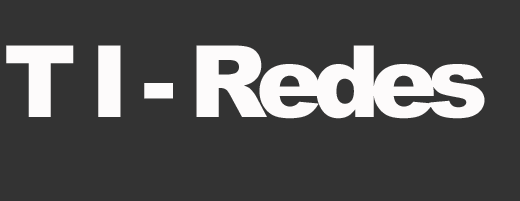
<style>
.page{position:relative;width:520px;height:201px;background:#333333}
.page>*{position:absolute;margin:0}
.t1{font:100px "Arial-Black";letter-spacing:-0.1em;color:#fdfbfb}
</style>
<div class="page">
<p class="t1" style="left:6px;top:45px;width:479px;height:74px">T I - Redes</p>
</div>
